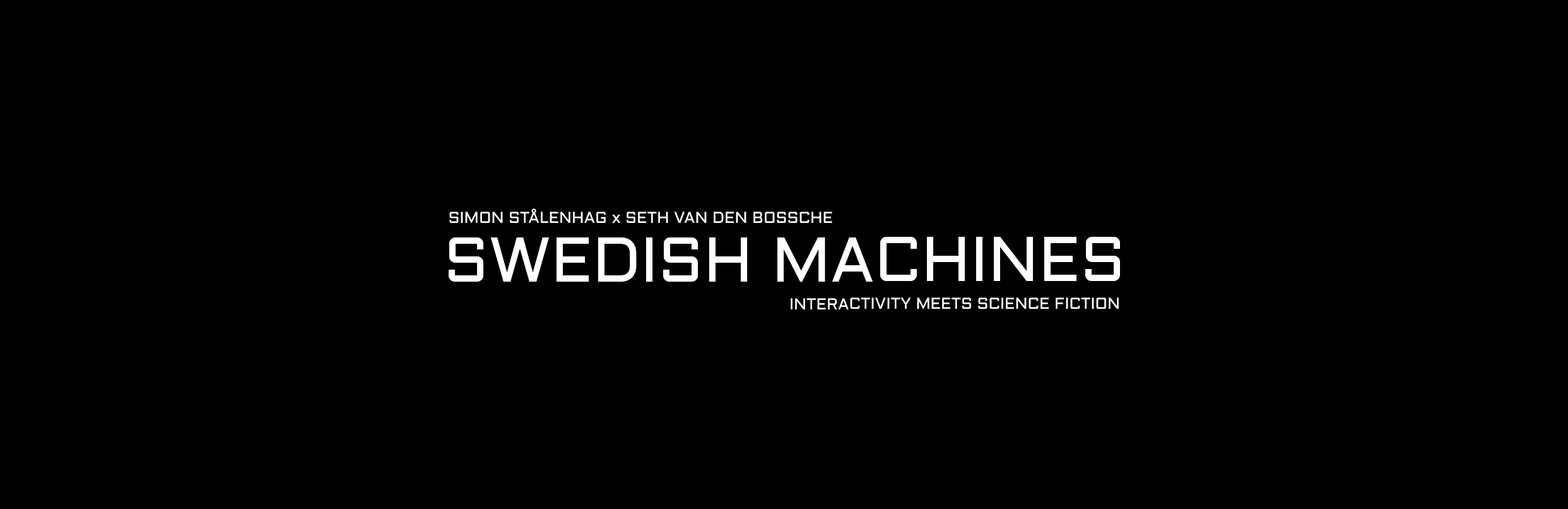
<style>
.page{position:relative;width:1568px;height:509px;background:#000000}
.page>*{position:absolute;margin:0}
.t1{font:15.8px "Aldrich-Regular";color:#ffffff}
.t2{font:63.1px "Aldrich-Regular";color:#ffffff}
</style>
<div class="page">
<p class="t1" style="left:449px;top:208px;width:383px;height:15px">SIMON STÅLENHAG x SETH VAN DEN BOSSCHE</p>
<p class="t2" style="left:449px;top:237px;width:671px;height:44px">SWEDISH MACHINES</p>
<p class="t1" style="left:791px;top:297px;width:328px;height:12px">INTERACTIVITY MEETS SCIENCE FICTION</p>
</div>
